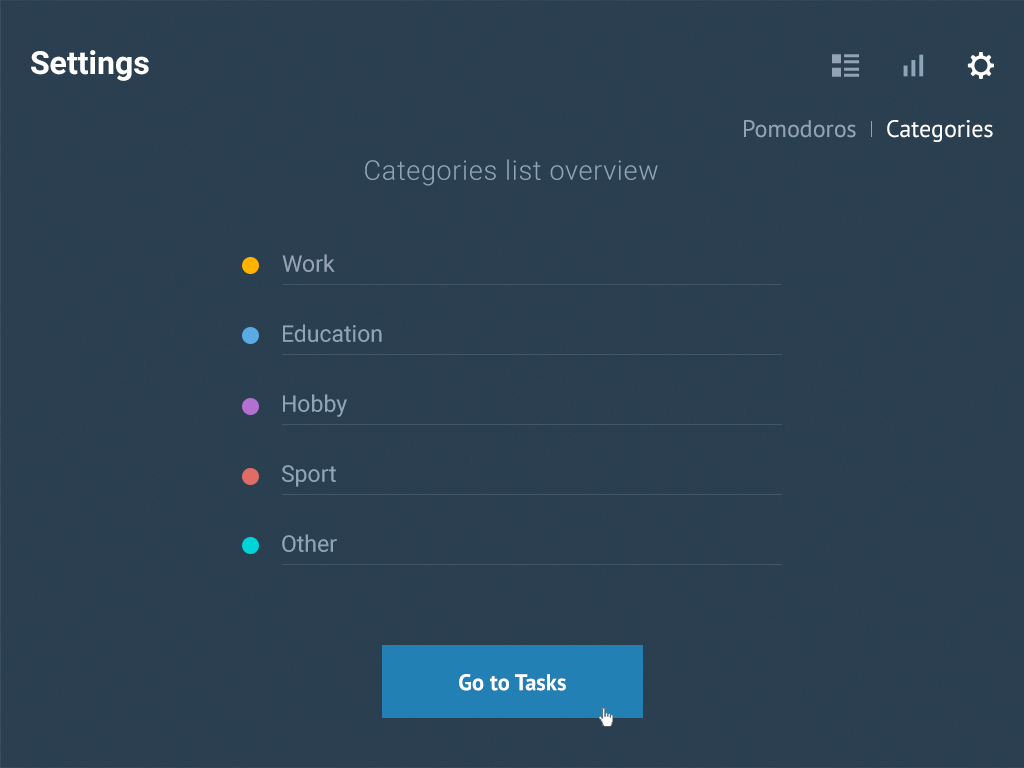
<style>
.page{position:relative;width:1024px;height:768px;background:#2a3f50}
.page>*{position:absolute;margin:0}
.t1{font:32px "Roboto-Bold";color:#ffffff}
.t2{font:24px "PTSans-Regular";color:#93a3b6}
.t3{font:24px "PTSans-Regular";color:#ffffff}
.t4{font:27px "Roboto-Light";letter-spacing:0.025em;color:#8da5b8}
.t5{font:23px "Roboto-Regular";color:#93a3b6}
.t6{font:23px "Roboto-Regular";color:#8da5b8}
.t7{font:22.6px "PTSans-Bold";color:#ffffff}
</style>
<div class="page">
<p class="t1" style="left:31px;top:50px;width:118px;height:31px">Settings</p>
<p class="t2" style="left:744px;top:120px;width:112px;height:18px">Pomodoros</p>
<p class="t3" style="left:887px;top:120px;width:106px;height:22px">Categories</p>
<p class="t4" style="left:365px;top:159px;width:293px;height:27px">Categories list overview</p>
<p class="t5" style="left:282px;top:254px;width:53px;height:18px">Work</p>
<p class="t6" style="left:283px;top:324px;width:99px;height:18px">Education</p>
<p class="t6" style="left:283px;top:394px;width:64px;height:23px">Hobby</p>
<p class="t6" style="left:282px;top:465px;width:54px;height:22px">Sport</p>
<p class="t6" style="left:282px;top:534px;width:55px;height:18px">Other</p>
<p class="t7" style="left:459px;top:674px;width:107px;height:17px">Go to Tasks</p>
</div>
